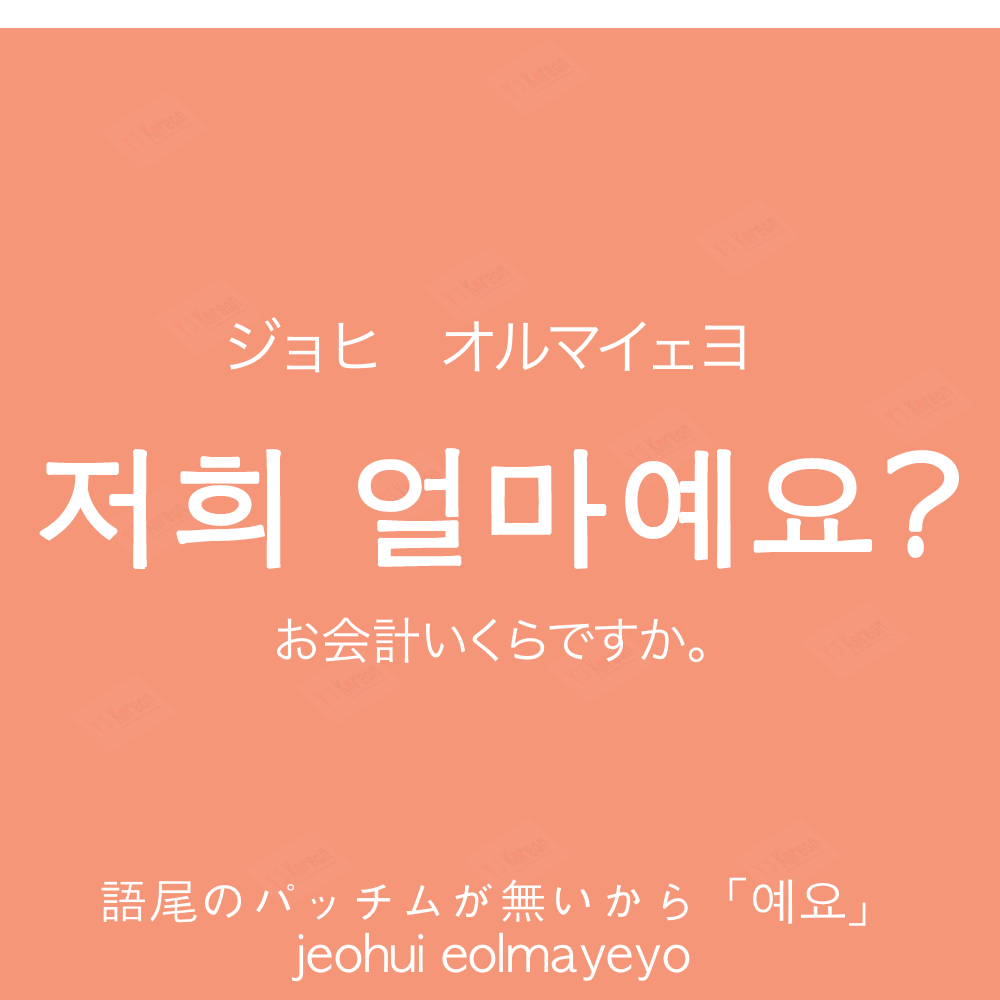
<style>
.page{position:relative;width:1000px;height:1000px;background:#f69679}
.page>*{position:absolute;margin:0}
.t1{font:60px "HiraKakuProN-W3";color:#ffffff;text-transform:uppercase}
.t2{font:130px "AppleGothic";color:#ffffff;font-weight:bold}
.t3{font:50px "HiraKakuProN-W3";color:#ffffff}
.t4{font:50px "AppleGothic";color:#ffffff}
</style>
<div class="page">
<p class="t1" style="left:229px;top:317px;width:516px;height:56px">ジョヒ　オルマイェヨ</p>
<p class="t2" style="left:39px;top:448px;width:920px;height:121px">저희 얼마예요?</p>
<p class="t3" style="left:277px;top:617px;width:427px;height:46px">お会計いくらですか。</p>
<p class="t4" style="left:101px;top:877px;width:765px;height:49px">語尾のパッチムが無いから「예요」</p>
<p class="t4" style="left:292px;top:932px;width:398px;height:50px">jeohui eolmayeyo</p>
</div>
